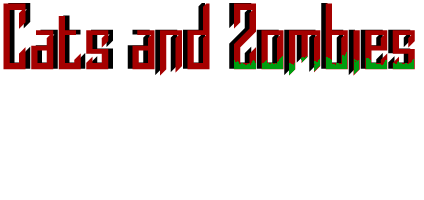
<style>
.page{position:relative;width:424px;height:200px;background:#ffffff}
.page>*{position:absolute;margin:0}
.t1{font:100px "Burdeles"}
</style>
<div class="page">
<p class="t1" style="left:8px;top:3px;width:403px;height:72px">Cats and  Zombies</p>
</div>
